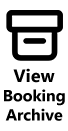
<style>
.page{position:relative;width:68px;height:131px;background:#ffffff}
.page>*{position:absolute;margin:0}
.t1{font:16px "MicrosoftTaiLe-Bold";color:#000000}
.t2{font:18px "MicrosoftTaiLe-Bold";color:#000000}
</style>
<div class="page">
<p class="t1" style="left:4px;top:68px;width:61px;height:53px;text-align:center"><span class="t2">View<br></span>Booking<br>Archive</p>
</div>
